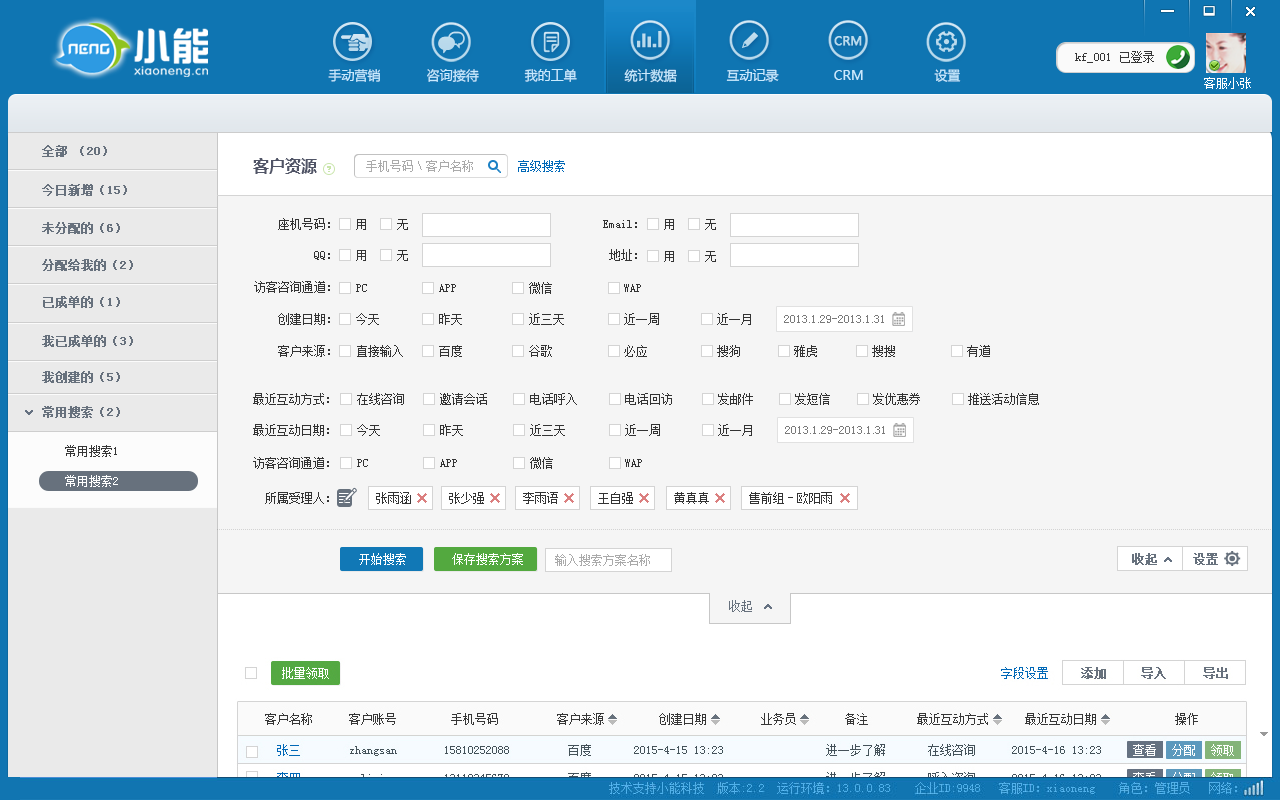
<style>
.page{position:relative;width:1280px;height:800px;background:#f5f5f5}
.page>*{position:absolute;margin:0}
.t1{font:12px "SimSun";color:#67717d;font-weight:bold}
.t2{font:16px "MicrosoftYaHei-Bold";color:#515567}
.t3{font:12px "SimSun";color:#aaaaaa}
.t4{font:12px "SimSun";color:#0068b7}
.t5{font:12px "SimSun";color:#333333}
.t6{font:12px "SimSun";color:#ffffff;text-transform:uppercase}
.t7{font:12px "SimSun";color:#67717d;text-transform:uppercase;font-weight:bold}
.t8{font:12px "SimSun";color:#67717d;text-transform:uppercase}
</style>
<div class="page">
<p class="t1" style="left:42px;top:145px;width:65px;height:12px">全部（20）</p>
<p class="t2" style="left:253px;top:158px;width:64px;height:16px">客户资源</p>
<p class="t3" style="left:366px;top:160px;width:107px;height:12px">手机号码\客户名称</p>
<p class="t4" style="left:518px;top:160px;width:47px;height:12px">高级搜索</p>
<p class="t1" style="left:42px;top:184px;width:85px;height:12px">今日新增（15）</p>
<p class="t5" style="left:278px;top:218px;width:52px;height:12px">座机号码：</p>
<p class="t5" style="left:356px;top:219px;width:10px;height:11px">用</p>
<p class="t5" style="left:397px;top:219px;width:11px;height:11px">无</p>
<p class="t5" style="left:603px;top:220px;width:34px;height:8px">Email：</p>
<p class="t5" style="left:664px;top:219px;width:10px;height:11px">用</p>
<p class="t5" style="left:705px;top:219px;width:11px;height:11px">无</p>
<p class="t5" style="left:314px;top:251px;width:16px;height:9px">QQ：</p>
<p class="t5" style="left:356px;top:250px;width:10px;height:11px">用</p>
<p class="t5" style="left:397px;top:250px;width:11px;height:11px">无</p>
<p class="t5" style="left:609px;top:249px;width:28px;height:12px">地址：</p>
<p class="t5" style="left:664px;top:251px;width:10px;height:11px">用</p>
<p class="t5" style="left:705px;top:251px;width:11px;height:11px">无</p>
<p class="t1" style="left:42px;top:258px;width:91px;height:12px">分配给我的（2）</p>
<p class="t5" style="left:254px;top:281px;width:76px;height:12px">访客咨询通道：</p>
<p class="t5" style="left:356px;top:284px;width:11px;height:8px">PC</p>
<p class="t5" style="left:439px;top:284px;width:17px;height:8px">APP</p>
<p class="t5" style="left:529px;top:282px;width:23px;height:12px">微信</p>
<p class="t5" style="left:624px;top:284px;width:17px;height:8px">WAP</p>
<p class="t1" style="left:43px;top:296px;width:77px;height:12px">已成单的（1）</p>
<p class="t5" style="left:278px;top:313px;width:52px;height:12px">创建日期：</p>
<p class="t5" style="left:356px;top:313px;width:23px;height:12px">今天</p>
<p class="t5" style="left:439px;top:313px;width:23px;height:12px">昨天</p>
<p class="t5" style="left:529px;top:313px;width:35px;height:12px">近三天</p>
<p class="t5" style="left:624px;top:313px;width:35px;height:12px">近一周</p>
<p class="t5" style="left:717px;top:313px;width:34px;height:12px">近一月</p>
<p class="t5" style="left:278px;top:345px;width:52px;height:12px">客户来源：</p>
<p class="t5" style="left:357px;top:345px;width:46px;height:12px">直接输入</p>
<p class="t5" style="left:439px;top:345px;width:23px;height:12px">百度</p>
<p class="t5" style="left:529px;top:345px;width:23px;height:12px">谷歌</p>
<p class="t5" style="left:624px;top:345px;width:23px;height:12px">必应</p>
<p class="t5" style="left:717px;top:345px;width:23px;height:12px">搜狗</p>
<p class="t5" style="left:794px;top:345px;width:23px;height:12px">雅虎</p>
<p class="t5" style="left:872px;top:345px;width:23px;height:12px">搜搜</p>
<p class="t5" style="left:967px;top:345px;width:23px;height:12px">有道</p>
<p class="t5" style="left:253px;top:393px;width:76px;height:12px">最近互动方式：</p>
<p class="t5" style="left:357px;top:393px;width:47px;height:12px">在线咨询</p>
<p class="t5" style="left:440px;top:393px;width:47px;height:12px">邀请会话</p>
<p class="t5" style="left:530px;top:393px;width:47px;height:12px">电话呼入</p>
<p class="t5" style="left:625px;top:393px;width:47px;height:12px">电话回访</p>
<p class="t5" style="left:718px;top:393px;width:35px;height:12px">发邮件</p>
<p class="t5" style="left:795px;top:393px;width:35px;height:12px">发短信</p>
<p class="t5" style="left:873px;top:393px;width:47px;height:12px">发优惠券</p>
<p class="t5" style="left:968px;top:393px;width:71px;height:12px">推送活动信息</p>
<p class="t5" style="left:253px;top:424px;width:76px;height:12px">最近互动日期：</p>
<p class="t5" style="left:357px;top:424px;width:23px;height:12px">今天</p>
<p class="t5" style="left:440px;top:424px;width:23px;height:12px">昨天</p>
<p class="t5" style="left:530px;top:424px;width:35px;height:12px">近三天</p>
<p class="t5" style="left:625px;top:424px;width:35px;height:12px">近一周</p>
<p class="t5" style="left:718px;top:424px;width:34px;height:12px">近一月</p>
<p class="t5" style="left:253px;top:457px;width:76px;height:12px">访客咨询通道：</p>
<p class="t5" style="left:357px;top:459px;width:11px;height:8px">PC</p>
<p class="t5" style="left:440px;top:459px;width:17px;height:8px">APP</p>
<p class="t5" style="left:530px;top:457px;width:23px;height:12px">微信</p>
<p class="t5" style="left:625px;top:459px;width:17px;height:8px">WAP</p>
<p class="t5" style="left:265px;top:492px;width:64px;height:12px">所属受理人：</p>
<p class="t5" style="left:376px;top:492px;width:35px;height:12px">张雨涵</p>
<p class="t5" style="left:449px;top:492px;width:35px;height:12px">张少强</p>
<p class="t5" style="left:523px;top:492px;width:35px;height:12px">李雨语</p>
<p class="t5" style="left:598px;top:492px;width:35px;height:12px">王自强</p>
<p class="t5" style="left:674px;top:492px;width:35px;height:12px">黄真真</p>
<p class="t5" style="left:749px;top:492px;width:83px;height:12px">售前组-欧阳雨</p>
<p class="t6" style="left:359px;top:553px;width:47px;height:12px">开始搜索</p>
<p class="t6" style="left:452px;top:553px;width:71px;height:12px">保存搜索方案</p>
<p class="t3" style="left:555px;top:554px;width:95px;height:12px">输入搜索方案名称</p>
<p class="t7" style="left:1132px;top:553px;width:25px;height:12px">收起</p>
<p class="t7" style="left:1193px;top:553px;width:25px;height:12px">设置</p>
<p class="t8" style="left:729px;top:600px;width:23px;height:12px">收起</p>
</div>
